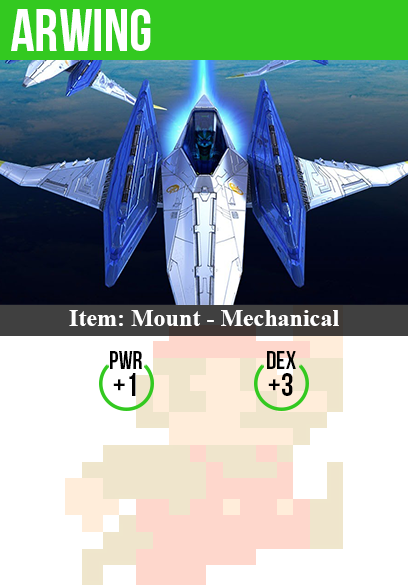
<style>
.page{position:relative;width:408px;height:585px;background:#ffffff}
.page>*{position:absolute;margin:0}
.t1{font:60px "BebasNeue";color:#ffffff}
.t2{font:24px "TimesNewRomanPS-BoldMT";color:#ffffff}
.t3{font:25px "BebasNeue";color:#000000}
.t4{font:32px "BebasNeue";color:#000000}
</style>
<div class="page">
<p class="t1" style="left:11px;top:9px;width:140px;height:42px">arwing</p>
<p class="t2" style="left:69px;top:310px;width:270px;height:16px">Item: Mount - Mechanical</p>
<p class="t3" style="left:110px;top:351px;width:32px;height:18px">pwr</p>
<p class="t3" style="left:267px;top:351px;width:29px;height:18px">dex</p>
<p class="t4" style="left:113px;top:373px;width:23px;height:23px">+1</p>
<p class="t4" style="left:268px;top:373px;width:25px;height:23px">+3</p>
</div>
